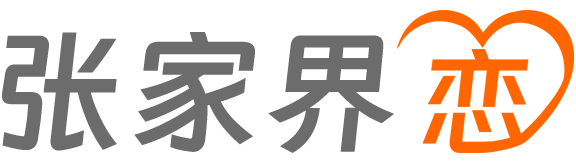
<style>
.page{position:relative;width:576px;height:162px;background:#ffffff}
.page>*{position:absolute;margin:0}
.t1{font:137.6px "DingTalk-JinBuTi";letter-spacing:-0.03em;color:#6c6c6c;font-weight:bold}
</style>
<div class="page">
<p class="t1" style="left:2px;top:32px;width:392px;height:121px">张家界</p>
</div>
